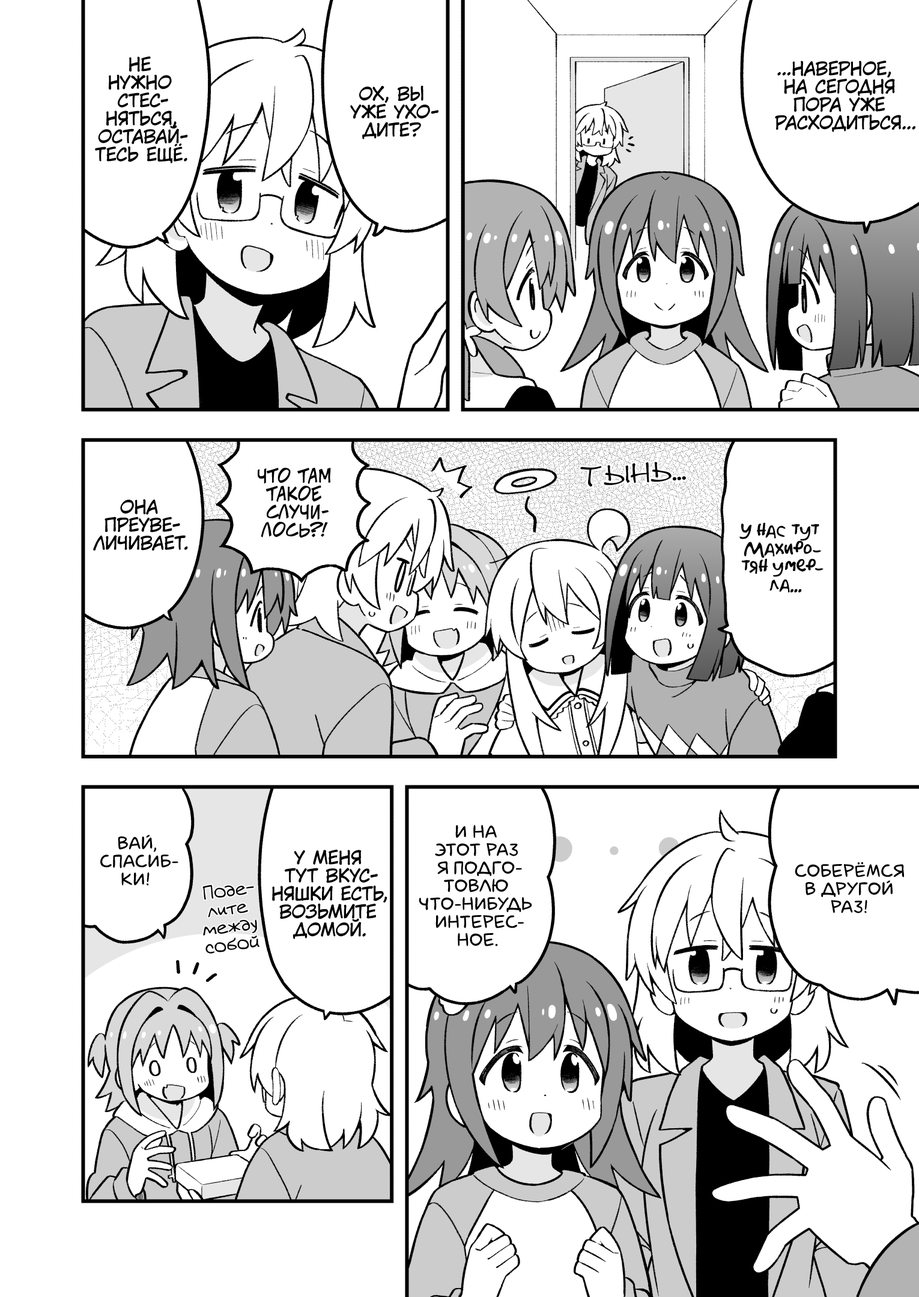
<style>
.page{position:relative;width:919px;height:1297px;background:#ffffff}
.page>*{position:absolute;margin:0}
.t1{font:18px "KuraiVoice2";color:#000000;text-transform:uppercase}
.t2{font:28.8px "DSNote";color:#000000;scale:1.1 1}
.t3{font:21.6px "DSNote";color:#000000;scale:1.1 1}
.t4{font:18px "v_CCJeffCampbell";color:#000000;text-transform:uppercase}
.t5{font:18px "AkbarPlain";color:#000000}
.t6{font:18px "laCartoonerie";color:#000000;text-transform:uppercase}
.t7{font:18px "v_Augie";color:#000000}
</style>
<div class="page">
<p class="t1" style="left:95px;top:56px;width:93px;height:107px;text-align:center">Не<br>нужно<br>стес-<br>няться,<br>оставай-<br>тесь ещё.</p>
<p class="t1" style="left:775px;top:61px;width:140px;height:71px;text-align:center">...Наверное,<br>на сегодня<br>пора уже<br>расходиться...</p>
<p class="t1" style="left:350px;top:85px;width:88px;height:54px;text-align:center">Ох, вы<br>уже ухо-<br>дите?</p>
<p class="t2" style="left:580px;top:462px;width:106px;height:25px;rotate:-4deg">тынь<span class="t3">...</span></p>
<p class="t4" style="left:258px;top:468px;width:73px;height:70px;text-align:center">Что там<br>такое<br>случи-<br>лось?!</p>
<p class="t1" style="left:93px;top:499px;width:95px;height:52px;text-align:center">Она<br>преуве-<br>личивает.</p>
<p class="t5" style="left:739px;top:523px;width:85px;height:70px;text-align:center">У нас тут<br>Махиро-<br>тян умер-<br>ла...</p>
<p class="t6" style="left:419px;top:825px;width:113px;height:122px;text-align:center">И на<br>этот раз<br>я подго-<br>товлю<br>что-нибудь<br>интерес-<br>ное.</p>
<p class="t6" style="left:100px;top:835px;width:78px;height:51px;text-align:center">Вай,<br>спасиб-<br>ки!</p>
<p class="t1" style="left:272px;top:850px;width:115px;height:89px;text-align:center">У меня<br>тут вкус-<br>няшки есть,<br>возьмите<br>домой.</p>
<p class="t6" style="left:795px;top:862px;width:109px;height:52px;text-align:center">Соберёмся<br>в другой<br>раз!</p>
<p class="t7" style="left:202px;top:885px;width:57px;height:69px;text-align:center;rotate:-7deg">Поде-<br>лите<br>между<br>собой</p>
</div>
